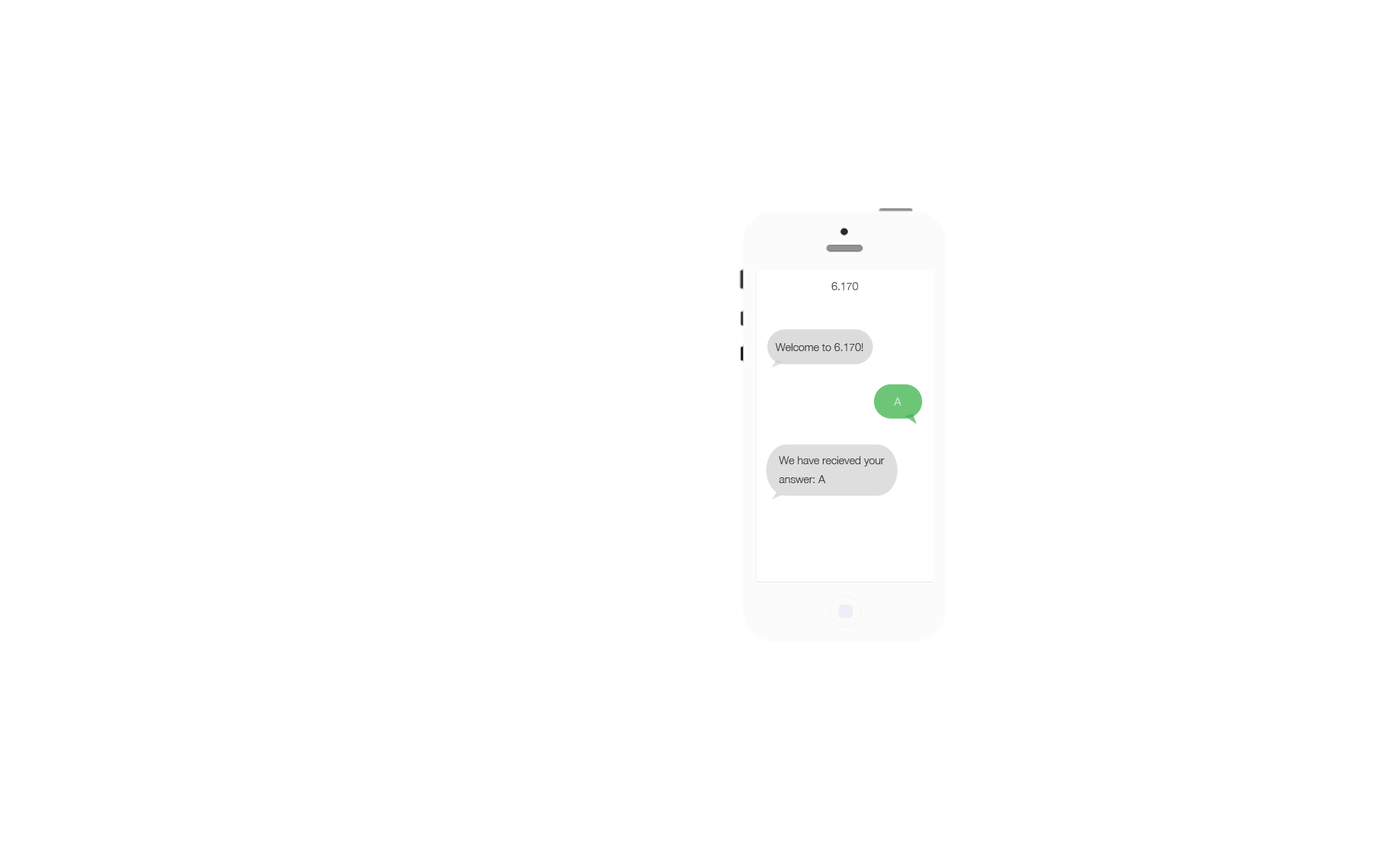
<style>
.page{position:relative;width:1393px;height:856px;background:#ffffff}
.page>*{position:absolute;margin:0}
.t1{font:10.8px "HelveticaNeue-Light";color:#4c4c4c}
.t2{font:10.8px "HelveticaNeue-Light";color:#414141}
.t3{font:10.8px "HelveticaNeue-Light";color:#d3edd6}
.t4{font:10.8px/19.1px "HelveticaNeue-Light";color:#424242}
</style>
<div class="page">
<p class="t1" style="left:831px;top:282px;width:27px;height:8px">6.170</p>
<p class="t2" style="left:775px;top:343px;width:88px;height:8px">Welcome to 6.170!</p>
<p class="t3" style="left:894px;top:398px;width:8px;height:8px">A</p>
<p class="t4" style="left:778px;top:456px;width:106px;height:27px">We have recieved your <br>answer: A</p>
</div>
